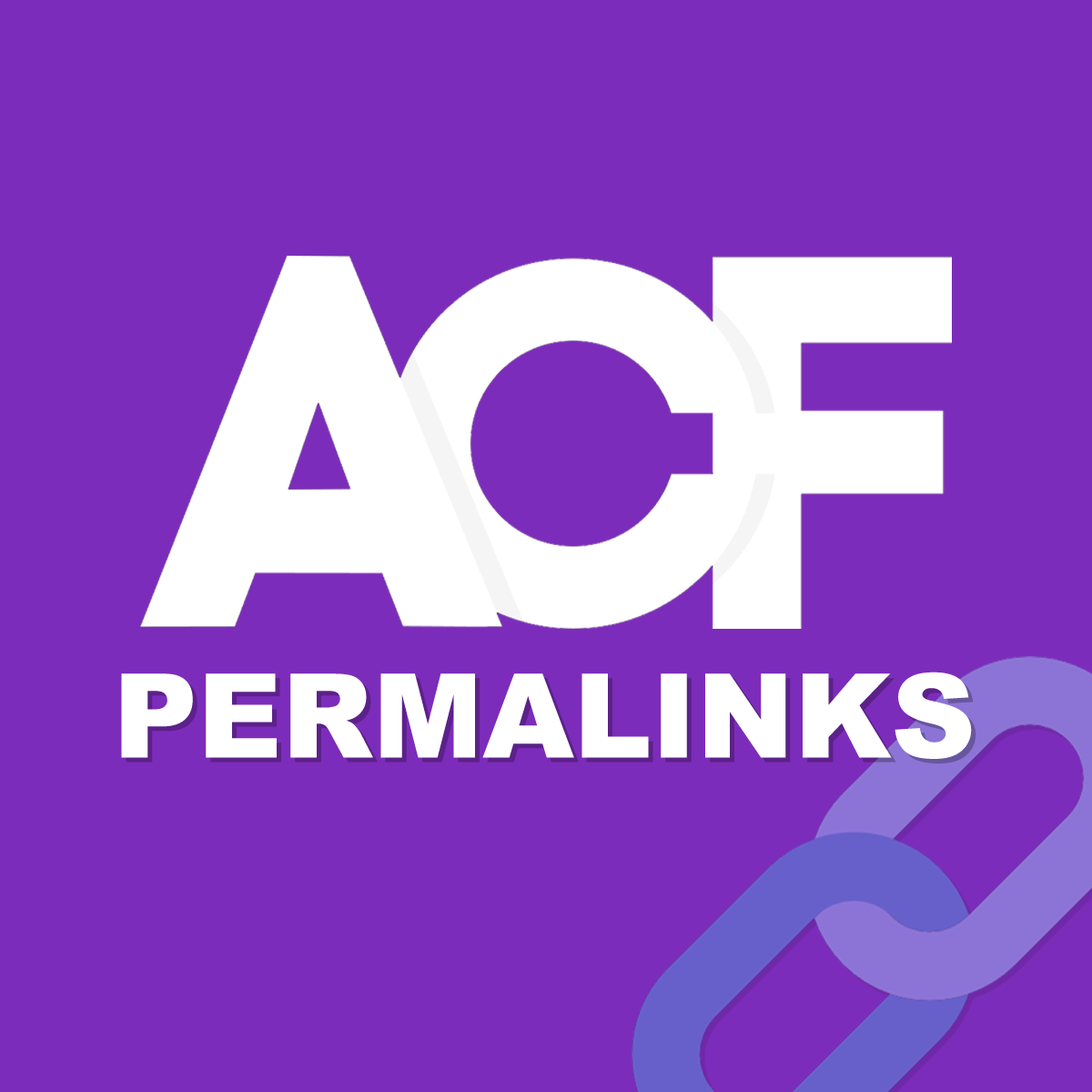
<style>
.page{position:relative;width:1092px;height:1092px;background:#7c2cba}
.page>*{position:absolute;margin:0}
.t1{font:116.7px "Arial-Black";color:#ffffff}
</style>
<div class="page">
<p class="t1" style="left:121px;top:672px;width:851px;height:87px">PERMALINKS</p>
</div>
